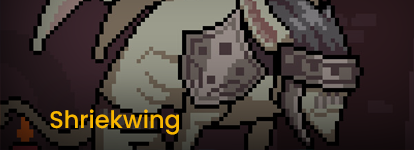
<style>
.page{position:relative;width:414px;height:150px}
.page>*{position:absolute;margin:0}
.t1{font:24px "Poppins-Medium";color:#f8b700}
</style>
<div class="page">
<p class="t1" style="left:50px;top:109px;width:129px;height:26px">Shriekwing</p>
</div>
